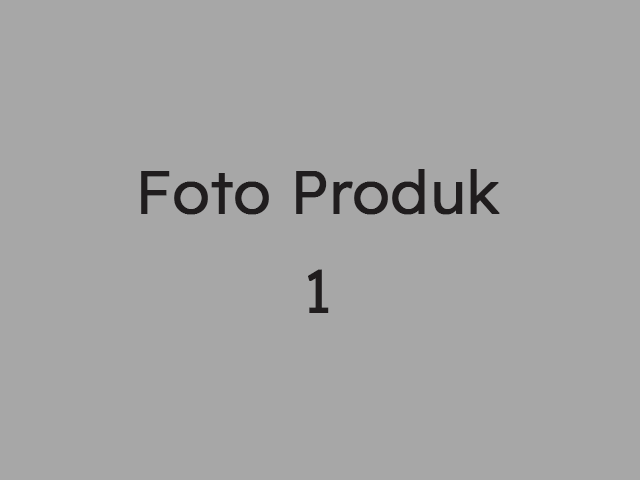
<style>
.page{position:relative;width:640px;height:480px;background:#a7a7a7}
.page>*{position:absolute;margin:0}
.t1{font:60px/99px "Lexend-Regular";color:#201d1e;font-weight:bold}
</style>
<div class="page">
<p class="t1" style="left:141px;top:169px;width:359px;height:144px;text-align:center">Foto Produk<br>1</p>
</div>
